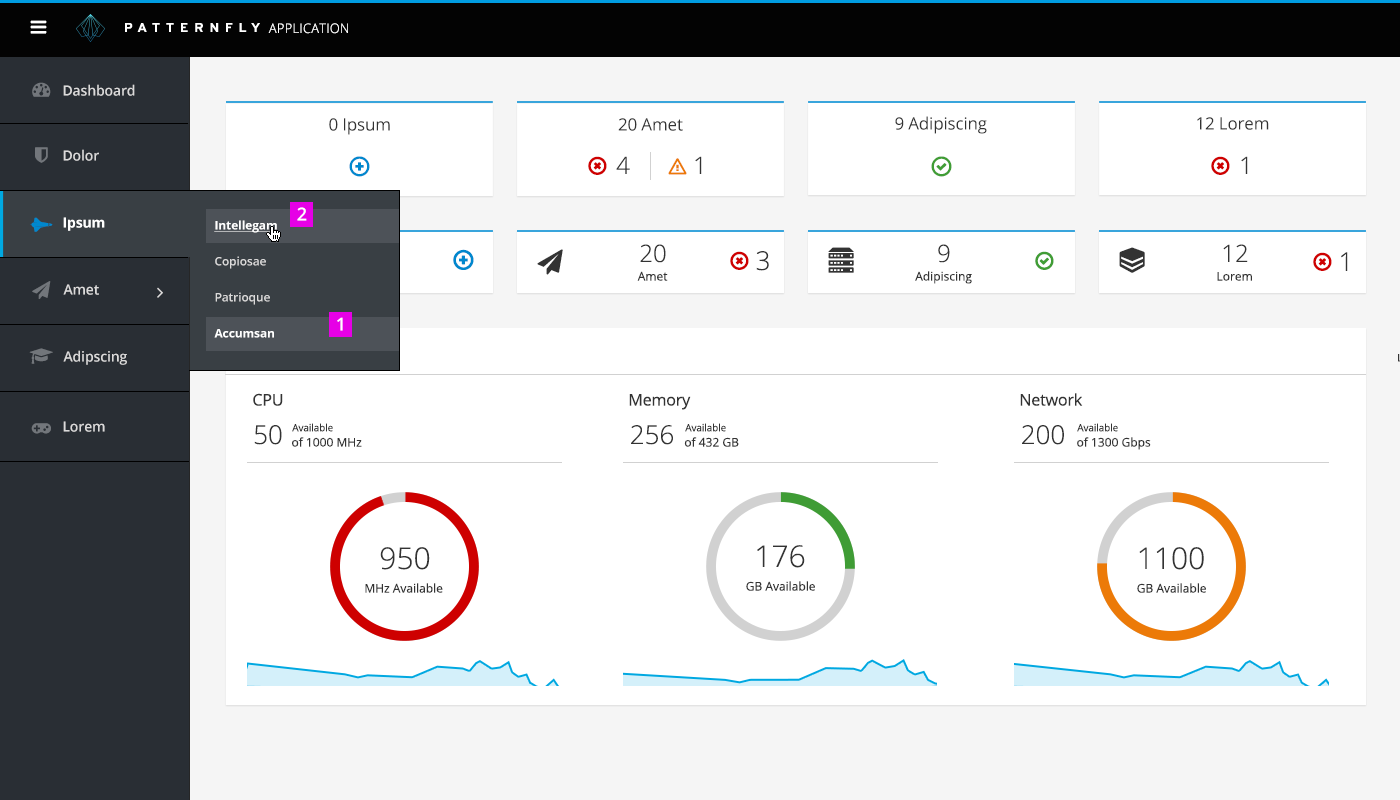
<style>
.page{position:relative;width:1400px;height:800px;background:#ffffff}
.page>*{position:absolute;margin:0}
.t1{font:13.2px "OpenSans-Light";letter-spacing:0.025em;color:#ffffff}
.t2{font:14px "OpenSans-Semibold";letter-spacing:-0.01em;color:#dbdada}
.t3{font:17px "OpenSans";letter-spacing:-0.01em;color:#333333}
.t4{font:24px "OpenSans-Light";color:#333333}
.t5{font:18px "OpenSans-Semibold";color:#ffffff}
.t6{font:14px "OpenSans-Bold";letter-spacing:-0.01em;color:#ffffff}
.t7{font:12px/36px "OpenSans-Semibold";letter-spacing:-0.01em;color:#dbdada}
.t8{font:12px/36px "OpenSans-Bold";letter-spacing:-0.01em;color:#ffffff;text-decoration:underline}
.t9{font:12px/36px "OpenSans-Bold";letter-spacing:-0.01em;color:#ffffff}
.t10{font:26px "OpenSans-Light";color:#333333}
.t11{font:12px "OpenSans";color:#333333}
.t12{font:16px "OpenSans";letter-spacing:-0.01em;color:#333333}
.t13{font:10px "OpenSans";letter-spacing:-0.01em;color:#333333}
.t14{font:30px "OpenSans-Light";color:#333333}
</style>
<div class="page">
<p class="t1" style="left:268px;top:23px;width:80px;height:11px">APPLICATION</p>
<p class="t2" style="left:63px;top:84px;width:72px;height:12px">Dashboard</p>
<p class="t3" style="left:329px;top:118px;width:61px;height:17px">0 Ipsum</p>
<p class="t3" style="left:618px;top:118px;width:65px;height:13px">20 Amet</p>
<p class="t3" style="left:895px;top:116px;width:92px;height:18px">9 Adipiscing</p>
<p class="t3" style="left:1197px;top:117px;width:72px;height:13px">12 Lorem</p>
<p class="t2" style="left:63px;top:149px;width:36px;height:12px">Dolor</p>
<p class="t4" style="left:616px;top:156px;width:14px;height:18px">4</p>
<p class="t4" style="left:695px;top:156px;width:7px;height:18px">1</p>
<p class="t4" style="left:1241px;top:156px;width:7px;height:18px">1</p>
<p class="t5" style="left:297px;top:207px;width:10px;height:14px">2</p>
<p class="t6" style="left:63px;top:217px;width:42px;height:14px">Ipsum</p>
<p class="t7" style="left:214px;top:220px;width:64px;height:118px"><span class="t8">Intellegam<br></span>Copiosae<br>Patrioque<br><span class="t9">Accumsan</span></p>
<p class="t4" style="left:640px;top:244px;width:26px;height:19px">20</p>
<p class="t4" style="left:938px;top:244px;width:12px;height:19px">9</p>
<p class="t4" style="left:1223px;top:244px;width:25px;height:18px">12</p>
<p class="t10" style="left:756px;top:251px;width:13px;height:20px">3</p>
<p class="t10" style="left:1341px;top:252px;width:7px;height:19px">1</p>
<p class="t11" style="left:637px;top:271px;width:31px;height:10px">Amet</p>
<p class="t11" style="left:915px;top:271px;width:57px;height:13px">Adipiscing</p>
<p class="t11" style="left:1217px;top:272px;width:35px;height:9px">Lorem</p>
<p class="t2" style="left:63px;top:284px;width:36px;height:11px">Amet</p>
<p class="t5" style="left:337px;top:317px;width:6px;height:14px">1</p>
<p class="t2" style="left:63px;top:350px;width:64px;height:15px">Adipscing</p>
<p class="t12" style="left:253px;top:393px;width:30px;height:13px">CPU</p>
<p class="t12" style="left:629px;top:394px;width:62px;height:16px">Memory</p>
<p class="t12" style="left:1020px;top:393px;width:63px;height:13px">Network</p>
<p class="t2" style="left:63px;top:421px;width:42px;height:11px">Lorem</p>
<p class="t10" style="left:254px;top:425px;width:28px;height:20px">50</p>
<p class="t13" style="left:292px;top:423px;width:41px;height:9px">Available</p>
<p class="t10" style="left:631px;top:425px;width:42px;height:20px">256</p>
<p class="t13" style="left:685px;top:423px;width:41px;height:9px">Available</p>
<p class="t10" style="left:1022px;top:425px;width:42px;height:20px">200</p>
<p class="t13" style="left:1077px;top:423px;width:41px;height:9px">Available</p>
<p class="t11" style="left:292px;top:437px;width:70px;height:10px">of 1000 MHz</p>
<p class="t11" style="left:684px;top:437px;width:55px;height:10px">of 432 GB</p>
<p class="t11" style="left:1077px;top:437px;width:74px;height:13px">of 1300 Gbps</p>
<p class="t14" style="left:757px;top:545px;width:48px;height:23px">176</p>
<p class="t14" style="left:380px;top:547px;width:50px;height:23px">950</p>
<p class="t14" style="left:1139px;top:547px;width:65px;height:23px">1100</p>
<p class="t11" style="left:746px;top:581px;width:69px;height:10px">GB Available</p>
<p class="t11" style="left:365px;top:583px;width:78px;height:10px">MHz Available</p>
<p class="t11" style="left:1137px;top:583px;width:69px;height:10px">GB Available</p>
</div>
